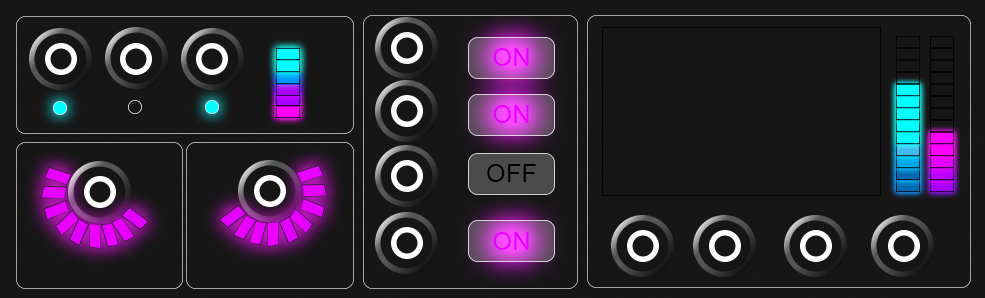
<style>
.page{position:relative;width:985px;height:298px;background:#161616}
.page>*{position:absolute;margin:0}
.t1{font:25px "ArialMT";letter-spacing:0.02em;color:#ea00ff;text-transform:uppercase}
.t2{font:25px "ArialMT";letter-spacing:0.02em;color:#000000;text-transform:uppercase}
</style>
<div class="page">
<p class="t1" style="left:493px;top:48px;width:36px;height:18px">On</p>
<p class="t1" style="left:493px;top:105px;width:36px;height:18px">On</p>
<p class="t2" style="left:487px;top:164px;width:49px;height:18px">OFF</p>
<p class="t1" style="left:493px;top:232px;width:36px;height:18px">On</p>
</div>
